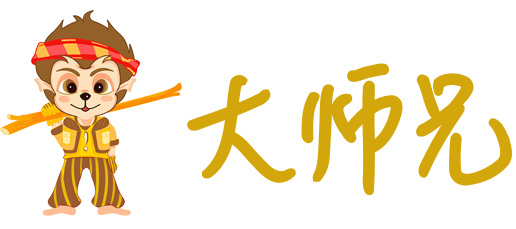
<style>
.page{position:relative;width:516px;height:229px;background:#ffffff}
.page>*{position:absolute;margin:0}
.t1{font:168.3px "MLingWaiMedium-SC";letter-spacing:-0.05em;color:#d3a70c;font-weight:bold}
</style>
<div class="page">
<p class="t1" style="left:187px;top:63px;width:325px;height:133px">大师兄</p>
</div>
